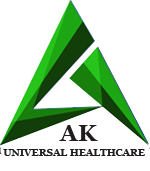
<style>
.page{position:relative;width:150px;height:171px;background:#ffffff}
.page>*{position:absolute;margin:0}
.t1{font:23px "Georgia-Bold";letter-spacing:0.025em;color:#211d1e}
.t2{font:9.5px "Georgia-Bold";letter-spacing:0.025em;color:#211d1e}
</style>
<div class="page">
<p class="t1" style="left:59px;top:125px;width:39px;height:16px">AK</p>
<p class="t2" style="left:3px;top:149px;width:142px;height:7px">UNIVERSAL HEALTHCARE</p>
</div>
